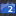
<style>
.page{position:relative;width:16px;height:16px}
.page>*{position:absolute;margin:0}
.t1{font:9px "MyriadPro-Regular";color:#ffffff}
</style>
<div class="page">
<p class="t1" style="left:8px;top:6px;width:5px;height:6px">2</p>
</div>
